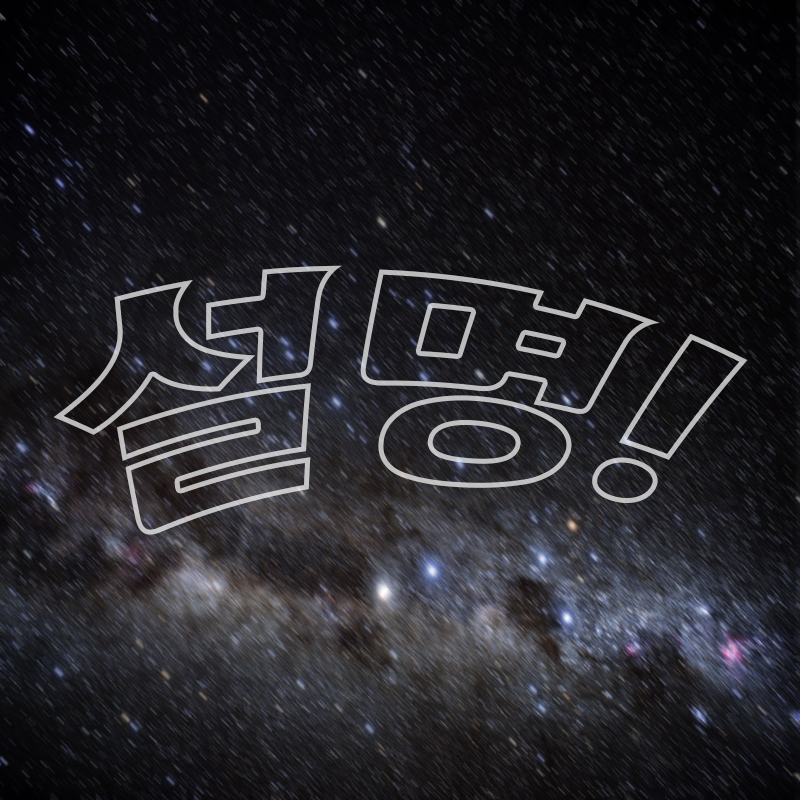
<style>
.page{position:relative;width:800px;height:800px}
.page>*{position:absolute;margin:0}
.t1{font:240px "KoreanSPD-R"}
</style>
<div class="page">
<p class="t1" style="left:53px;top:265px;width:695px;height:270px">설명!</p>
</div>
